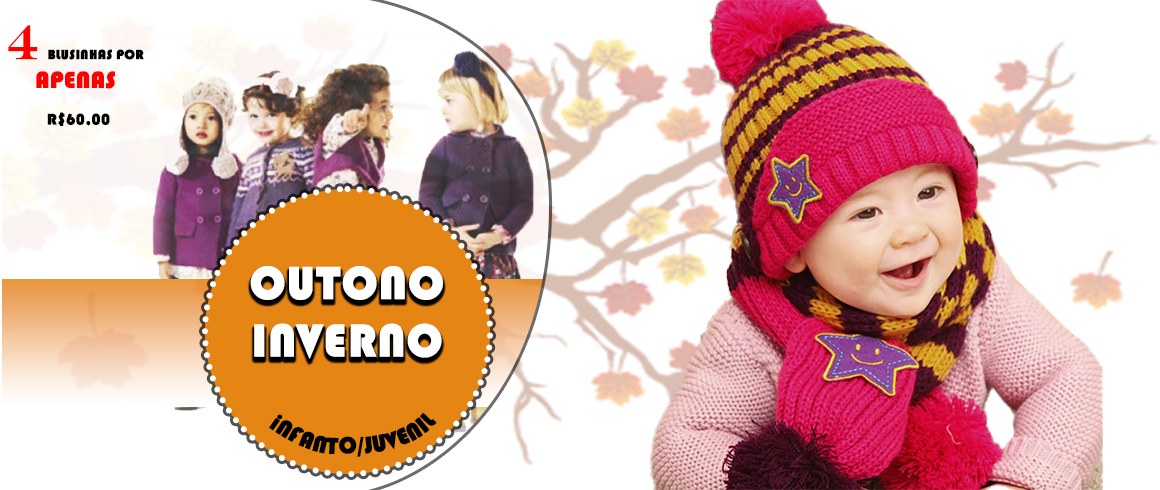
<style>
.page{position:relative;width:1160px;height:490px;background:#ffffff}
.page>*{position:absolute;margin:0}
.t1{font:14px "Bauhaus93";color:#000000;font-weight:bold}
.t2{font:48px "EngraversMT";color:#ff0000;font-weight:bold}
.t3{font:24px "Bauhaus93";color:#ff0000;font-weight:bold}
.t4{font:16px "Bauhaus93";color:#000000;font-weight:bold}
.t5{font:48px "Bauhaus93";color:#ffffff;font-weight:bold}
.t6{font:24px "Bauhaus93";color:#000000;font-weight:bold}
</style>
<div class="page">
<p class="t1" style="left:8px;top:25px;width:136px;height:64px;text-align:center"><span class="t2">4 </span>BLUSINHAS POR<br><span class="t3">APENAS</span></p>
<p class="t4" style="left:47px;top:112px;width:63px;height:14px">R$60,00</p>
<p class="t5" style="left:250px;top:266px;width:193px;height:93px;text-align:center">OUTONO<br>INVERNO</p>
<p class="t6" style="left:269px;top:412px;width:168px;height:45px;text-align:center">iNFANTO/JUVENIL</p>
</div>
